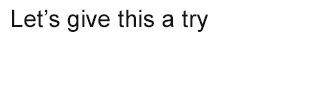
<style>
.page{position:relative;width:320px;height:90px;background:#ffffff}
.page>*{position:absolute;margin:0}
.t1{font:24px "ArialMT";color:#141414}
</style>
<div class="page">
<p class="t1" style="left:12px;top:9px;width:196px;height:23px">Let’s give this a try<br>My name is Yousuf</p>
</div>
